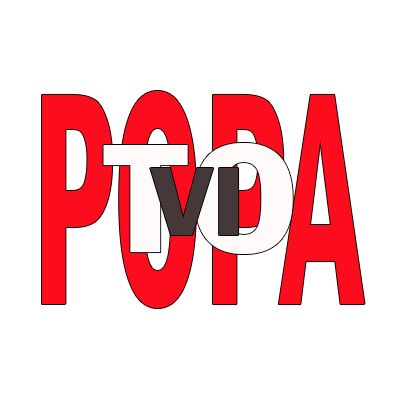
<style>
.page{position:relative;width:400px;height:400px;background:#ffffff}
.page>*{position:absolute;margin:0}
.t1{font:314px "FranklinGothic-DemiCond";color:#fc0d1e;scale:0.51 1}
.t2{font:159.6px "FranklinGothic-DemiCond";color:#fefafa;scale:1.27 1}
.t3{font:100px "FranklinGothic-DemiCond";color:#463739;scale:1.29 1}
</style>
<div class="page">
<p class="t1" style="left:42px;top:90px;width:323px;height:218px">POPA</p>
<p class="t2" style="left:103px;top:143px;width:190px;height:111px">TO</p>
<p class="t3" style="left:150px;top:168px;width:89px;height:67px">VI</p>
</div>
